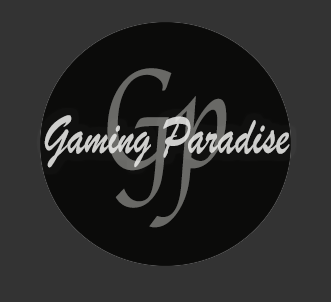
<style>
.page{position:relative;width:331px;height:302px;background:#333333}
.page>*{position:absolute;margin:0}
.t1{font:146.1px "Apple-Chancery";color:#6a6a67;scale:0.75 1}
.t2{font:57.1px "BrushScriptMT";color:#cececc;scale:0.75 1}
</style>
<div class="page">
<p class="t1" style="left:107px;top:68px;width:120px;height:160px">Gp</p>
<p class="t2" style="left:44px;top:115px;width:246px;height:53px">Gaming Paradise</p>
</div>
